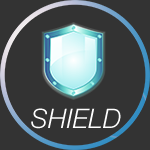
<style>
.page{position:relative;width:150px;height:150px;background:#333333}
.page>*{position:absolute;margin:0}
.t1{font:27px "Helvetica-4-Light-Italic";color:#ffffff;text-transform:uppercase}
</style>
<div class="page">
<p class="t1" style="left:31px;top:108px;width:90px;height:21px">shield</p>
</div>
